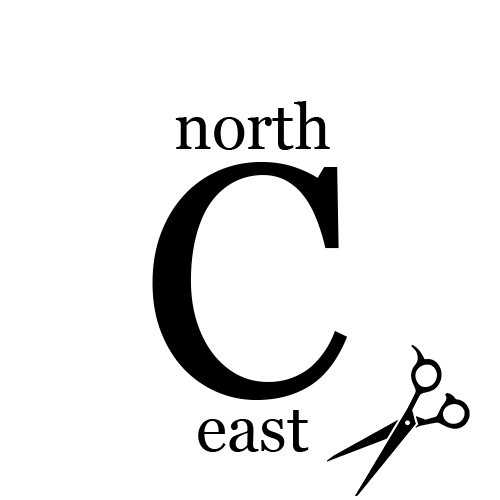
<style>
.page{position:relative;width:500px;height:500px;background:#ffffff}
.page>*{position:absolute;margin:0}
.t1{font:64px "Georgia";color:#000000}
.t2{font:328.7px "Georgia";color:#000000}
</style>
<div class="page">
<p class="t1" style="left:175px;top:101px;width:155px;height:49px">north</p>
<p class="t2" style="left:152px;top:162px;width:196px;height:238px">C</p>
<p class="t1" style="left:198px;top:410px;width:111px;height:42px">east</p>
</div>
